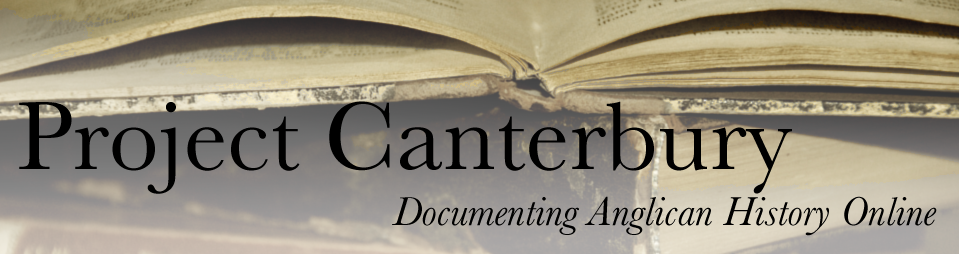
<style>
.page{position:relative;width:959px;height:254px}
.page>*{position:absolute;margin:0}
.t1{font:100px "Baskerville";color:#000000}
.t2{font:41.7px "Baskerville-Italic";color:#000000}
</style>
<div class="page">
<p class="t1" style="left:19px;top:101px;width:773px;height:93px">Project Canterbury</p>
<p class="t2" style="left:392px;top:196px;width:545px;height:40px">Documenting Anglican History Online</p>
</div>
